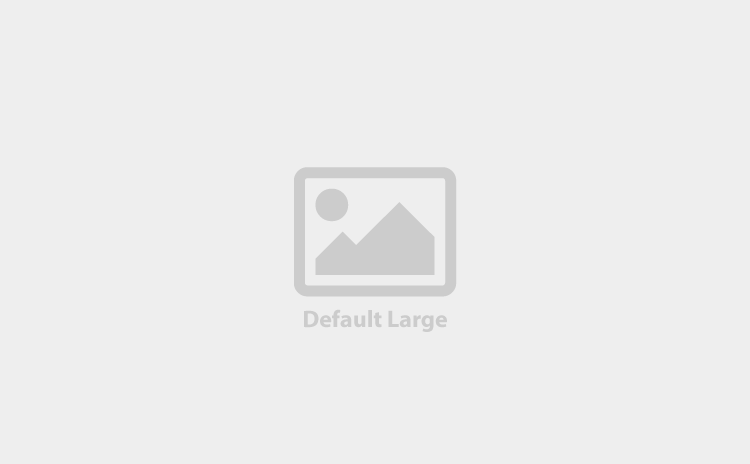
<style>
.page{position:relative;width:750px;height:464px;background:#eeeeee}
.page>*{position:absolute;margin:0}
.t1{font:24px "MyriadPro-Bold";color:#cccccc}
</style>
<div class="page">
<p class="t1" style="left:304px;top:309px;width:143px;height:23px">Default Large</p>
</div>
